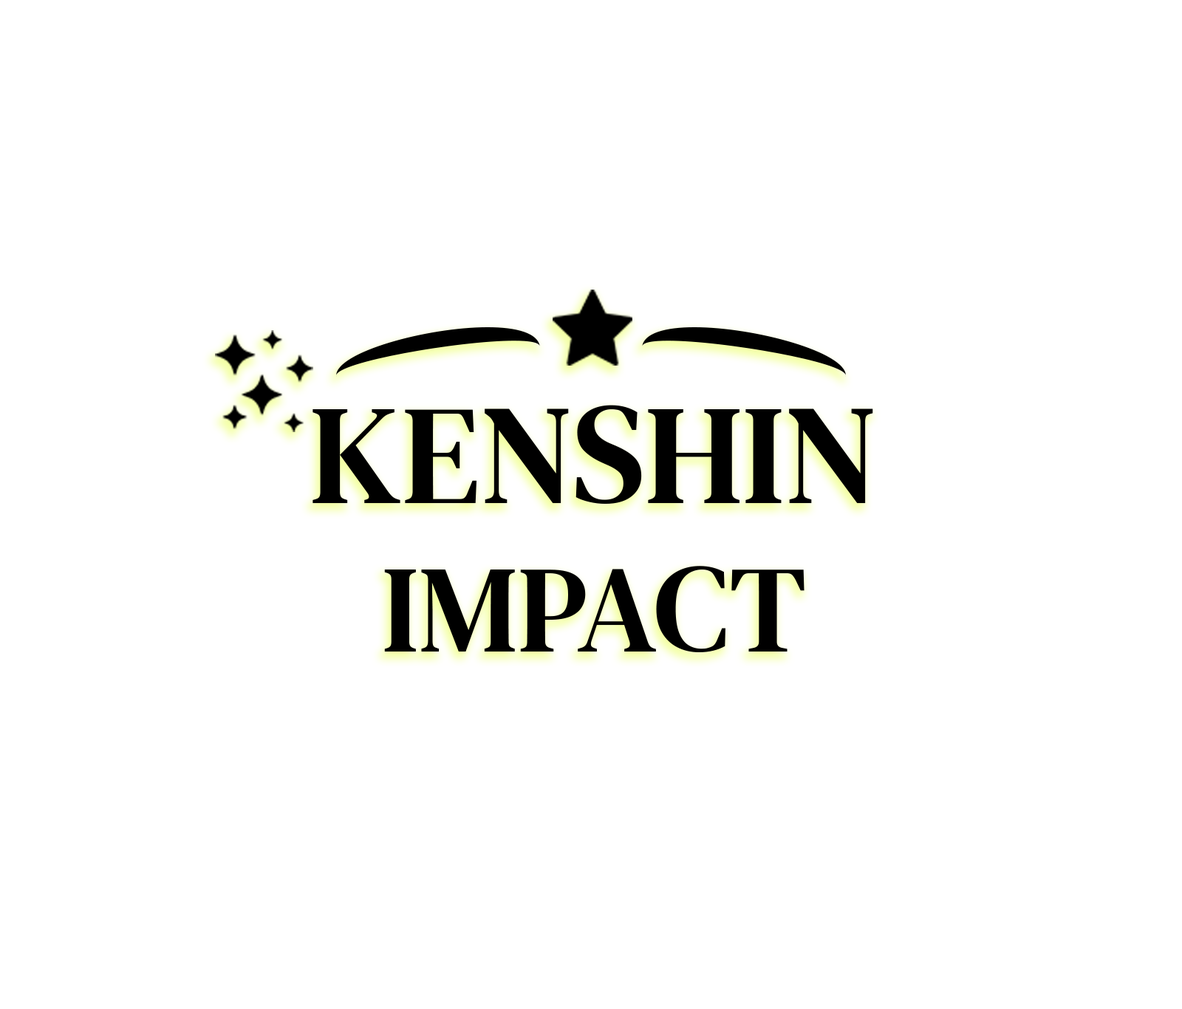
<style>
.page{position:relative;width:1182px;height:1009px;background:#ffffff}
.page>*{position:absolute;margin:0}
.t1{font:141.8px "DMSerifText-Regular";color:#000000}
.t2{font:124.1px "DMSerifText-Regular";color:#000000}
</style>
<div class="page">
<p class="t1" style="left:312px;top:405px;width:561px;height:247px;text-align:center">KENSHIN<br><span class="t2">IMPACT</span></p>
</div>
